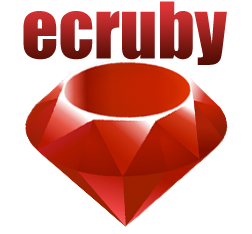
<style>
.page{position:relative;width:252px;height:234px;background:#ffffff}
.page>*{position:absolute;margin:0}
.t1{font:72px "Impact"}
</style>
<div class="page">
<p class="t1" style="left:23px;top:1px;width:204px;height:64px">ecruby</p>
</div>
